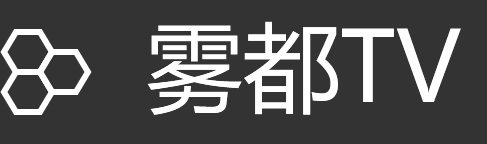
<style>
.page{position:relative;width:487px;height:144px;background:#333333}
.page>*{position:absolute;margin:0}
.t1{font:97px "MicrosoftYaHei";color:#ffffff}
</style>
<div class="page">
<p class="t1" style="left:147px;top:21px;width:314px;height:94px">雾都TV</p>
</div>
